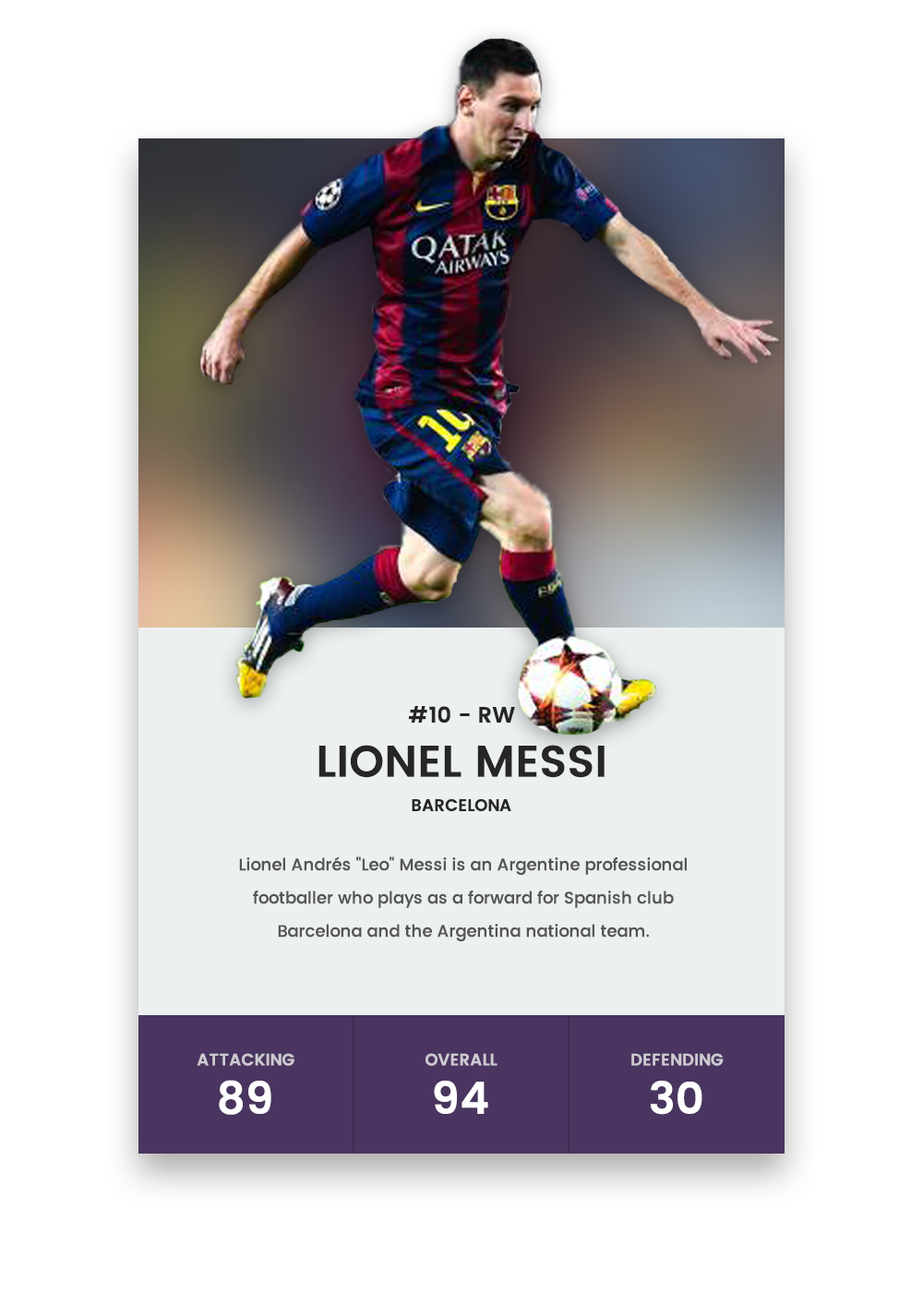
<style>
.page{position:relative;width:923px;height:1292px;background:#ffffff}
.page>*{position:absolute;margin:0}
.t1{font:22.1px "Poppins-SemiBold";color:#262626}
.t2{font:44.3px "Poppins-SemiBold";color:#262626}
.t3{font:16.6px "Poppins-SemiBold";color:#262626}
.t4{font:16.6px/33.2px "Poppins-Medium";color:#555555}
.t5{font:16.6px "Poppins-SemiBold";color:#cdcad1}
.t6{font:44.3px "Poppins-SemiBold";color:#ffffff}
</style>
<div class="page">
<p class="t1" style="left:409px;top:706px;width:106px;height:17px">#10 - RW</p>
<p class="t2" style="left:318px;top:745px;width:286px;height:33px">LIONEL MESSI</p>
<p class="t3" style="left:412px;top:799px;width:99px;height:12px">BARCELONA</p>
<p class="t4" style="left:239px;top:856px;width:448px;height:85px;text-align:center">Lionel Andrés "Leo" Messi is an Argentine professional<br>footballer who plays as a forward for Spanish club<br>Barcelona and the Argentina national team.</p>
<p class="t5" style="left:197px;top:1053px;width:97px;height:13px">ATTACKING</p>
<p class="t5" style="left:425px;top:1053px;width:72px;height:13px">OVERALL</p>
<p class="t5" style="left:631px;top:1053px;width:93px;height:13px">DEFENDING</p>
<p class="t6" style="left:219px;top:1080px;width:52px;height:35px">89</p>
<p class="t6" style="left:434px;top:1081px;width:54px;height:33px">94</p>
<p class="t6" style="left:650px;top:1081px;width:52px;height:34px">30</p>
</div>
